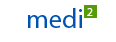
<style>
.page{position:relative;width:116px;height:42px;background:#ffffff}
.page>*{position:absolute;margin:0}
.t1{font:27px "MyriadPro-Regular";color:#0053b1}
.t2{font:12px "MyriadPro-Regular";color:#ffffff}
</style>
<div class="page">
<p class="t1" style="left:28px;top:8px;width:54px;height:20px">medi</p>
<p class="t2" style="left:87px;top:8px;width:6px;height:8px">2</p>
</div>
